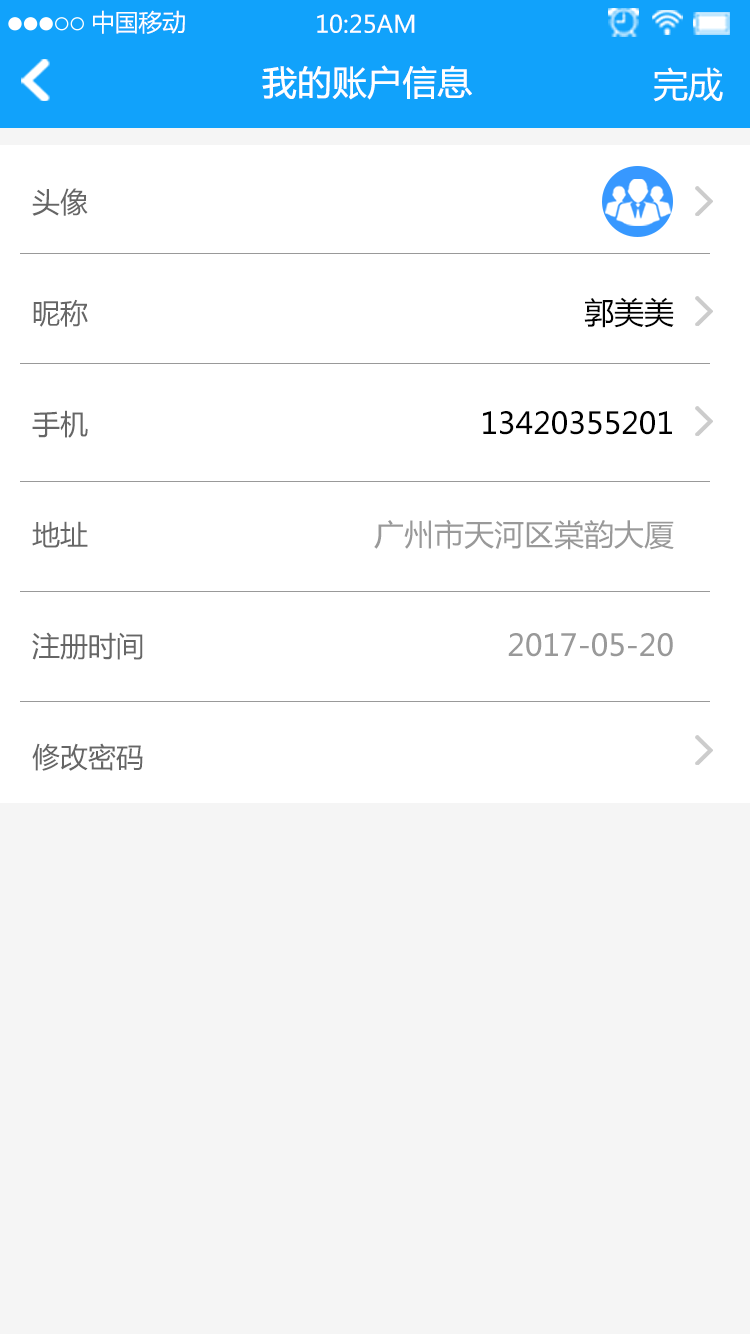
<style>
.page{position:relative;width:750px;height:1334px;background:#ffffff}
.page>*{position:absolute;margin:0}
.t1{font:23.7px "MicrosoftYaHei";color:#ffffff}
.t2{font:34px "MicrosoftYaHei";color:#ffffff;font-weight:bold}
.t3{font:35px "MicrosoftYaHei";color:#ffffff}
.t4{font:28px/111px "MicrosoftYaHei";color:#666666}
.t5{font:30px/111px "MicrosoftYaHei";color:#999999}
.t6{font:30px/111px "MicrosoftYaHei";color:#000000}
</style>
<div class="page">
<p class="t1" style="left:93px;top:10px;width:92px;height:24px">中国移动</p>
<p class="t1" style="left:317px;top:14px;width:98px;height:19px">10:25AM</p>
<p class="t2" style="left:262px;top:65px;width:210px;height:35px">我的账户信息</p>
<p class="t3" style="left:653px;top:67px;width:70px;height:35px">完成</p>
<p class="t4" style="left:32px;top:188px;width:111px;height:583px">头像<br>昵称<br>手机<br>地址<br>注册时间<br>修改密码</p>
<p class="t5" style="left:374px;top:297px;width:300px;height:360px;text-align:right"><span class="t6"><br>郭美美<br>13420355201<br></span>广州市天河区棠韵大厦<br>2017-05-20</p>
</div>
